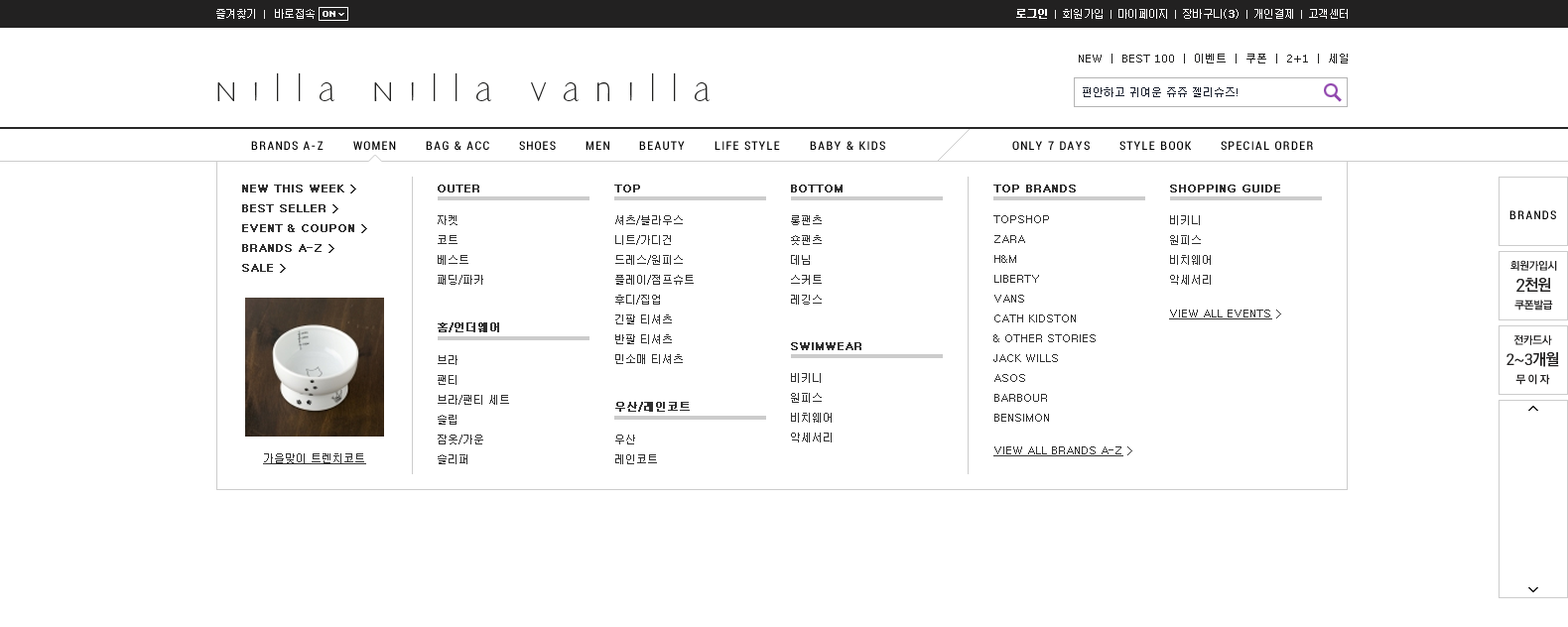
<style>
.page{position:relative;width:1568px;height:627px;background:#ffffff}
.page>*{position:absolute;margin:0}
.t1{font:10.9px "Dotum";letter-spacing:-0.05em;color:#ffffff}
.t2{font:10.9px "Dotum";letter-spacing:-0.05em;color:#ffffff;font-weight:bold}
.t3{font:10.9px "Dotum";color:#ffffff}
.t4{font:10.9px "Dotum";color:#ffffff;font-weight:bold}
.t5{font:10.9px "Dotum";color:#212120}
.t6{font:10.9px "Verdana";color:#212120}
.t7{font:38.7px "EricSansPro-Regular";letter-spacing:0.35em;color:#212120}
.t8{font:10.9px "Dotum";color:#191f2d}
.t9{font:11.9px "Roboto-Condensed";letter-spacing:0.1em;color:#000000}
.t10{font:10.9px/19.8px "Dotum";color:#303030;font-weight:bold}
.t11{font:10.9px "Dotum";color:#303030;font-weight:bold}
.t12{font:10.9px/19.8px "Dotum";color:#303030}
.t13{font:10.9px "RixGoB";letter-spacing:-0.05em;color:#222121}
.t14{font:17.9px "Roboto-Regular";letter-spacing:-0.05em;color:#222121}
.t15{font:15.9px "RixGoB";letter-spacing:-0.05em;color:#222121}
.t16{font:10.9px "Dotum";color:#303030;text-decoration:underline}
.t17{font:10.9px "Dotum";color:#303030}
.t18{font:15.9px "Roboto-Regular";letter-spacing:-0.05em;color:#222121}
</style>
<div class="page">
<p class="t1" style="left:216px;top:9px;width:39px;height:10px">즐겨찾기</p>
<p class="t1" style="left:275px;top:9px;width:40px;height:10px">바로접속</p>
<p class="t2" style="left:1016px;top:9px;width:31px;height:10px">로그인</p>
<p class="t1" style="left:1063px;top:9px;width:40px;height:10px">회원가입</p>
<p class="t1" style="left:1118px;top:9px;width:49px;height:10px">마이페이지</p>
<p class="t1" style="left:1183px;top:9px;width:39px;height:10px">장바구니</p>
<p class="t3" style="left:1224px;top:9px;width:15px;height:10px">(<span class="t4">3</span>)</p>
<p class="t1" style="left:1254px;top:9px;width:39px;height:10px">개인결제</p>
<p class="t1" style="left:1309px;top:9px;width:39px;height:10px">고객센터</p>
<p class="t5" style="left:1079px;top:54px;width:269px;height:10px">NEW  |  BEST <span class="t6">100</span>  |  이벤트  |  쿠폰  |  <span class="t6">2+1</span>  |  세일</p>
<p class="t7" style="left:217px;top:72px;width:493px;height:29px">Nilla Nilla Vanilla</p>
<p class="t8" style="left:1083px;top:87px;width:155px;height:10px">편안하고 귀여운 쥬쥬 젤리슈즈!</p>
<p class="t9" style="left:251px;top:141px;width:73px;height:9px">BRANDS A-Z</p>
<p class="t9" style="left:353px;top:141px;width:43px;height:9px">WOMEN</p>
<p class="t9" style="left:426px;top:141px;width:63px;height:9px">BAG &amp; ACC</p>
<p class="t9" style="left:519px;top:141px;width:37px;height:9px">SHOES</p>
<p class="t9" style="left:586px;top:141px;width:23px;height:9px">MEN</p>
<p class="t9" style="left:639px;top:141px;width:46px;height:9px">BEAUTY</p>
<p class="t9" style="left:715px;top:141px;width:65px;height:9px">LIFE STYLE</p>
<p class="t9" style="left:810px;top:141px;width:75px;height:9px">BABY &amp; KIDS</p>
<p class="t9" style="left:1012px;top:141px;width:78px;height:9px">ONLY 7 DAYS</p>
<p class="t9" style="left:1119px;top:141px;width:73px;height:9px">STYLE BOOK</p>
<p class="t9" style="left:1221px;top:141px;width:92px;height:9px">SPECIAL ORDER</p>
<p class="t10" style="left:242px;top:185px;width:125px;height:88px">NEW THIS WEEK &gt;<br>BEST SELLER &gt;<br>EVENT &amp; COUPON &gt;<br>BRANDS A-Z &gt;<br>SALE &gt;</p>
<p class="t11" style="left:438px;top:185px;width:41px;height:8px">OUTER</p>
<p class="t11" style="left:614px;top:185px;width:26px;height:8px">TOP</p>
<p class="t11" style="left:791px;top:185px;width:52px;height:8px">BOTTOM</p>
<p class="t11" style="left:993px;top:185px;width:83px;height:8px">TOP BRANDS</p>
<p class="t11" style="left:1170px;top:185px;width:110px;height:8px">SHOPPING GUIDE</p>
<p class="t12" style="left:438px;top:215px;width:45px;height:70px">자켓<br>코트<br>베스트<br>패딩/파카</p>
<p class="t12" style="left:615px;top:215px;width:79px;height:149px">셔츠/블라우스<br>니트/가디건<br>드레스/원피스<br>플레이/점프슈트<br>후디/집업<br>긴팔 티셔츠<br>반팔 티셔츠<br>민소매 티셔츠</p>
<p class="t12" style="left:791px;top:215px;width:31px;height:90px">롱팬츠<br>숏팬츠<br>데님<br>스커트<br>레깅스</p>
<p class="t12" style="left:993px;top:215px;width:103px;height:207px">TOPSHOP<br>ZARA<br>H&amp;M<br>LIBERTY<br>VANS<br>CATH KIDSTON<br>&amp; OTHER STORIES<br>JACK WILLS<br>ASOS<br>BARBOUR<br>BENSIMON</p>
<p class="t12" style="left:1170px;top:215px;width:41px;height:70px">비키니<br>원피스<br>비치웨어<br>악세서리</p>
<p class="t9" style="left:1509px;top:210px;width:47px;height:9px">BRANDS</p>
<p class="t13" style="left:1510px;top:260px;width:47px;height:51px;text-align:center">회원가입시<br><br><br>쿠폰발급</p>
<p class="t14" style="left:1516px;top:279px;width:9px;height:13px">2</p>
<p class="t15" style="left:1524px;top:278px;width:27px;height:15px">천원</p>
<p class="t16" style="left:1169px;top:310px;width:112px;height:10px">VIEW ALL EVENTS<span class="t17"> &gt;</span></p>
<p class="t11" style="left:438px;top:323px;width:61px;height:9px">홈/언더웨어</p>
<p class="t13" style="left:1513px;top:335px;width:39px;height:50px;text-align:center">전카드사<br><br><br>무 이 자</p>
<p class="t11" style="left:791px;top:342px;width:70px;height:8px">SWIMWEAR</p>
<p class="t18" style="left:1506px;top:353px;width:26px;height:12px">2~3</p>
<p class="t15" style="left:1532px;top:352px;width:27px;height:15px">개월</p>
<p class="t12" style="left:438px;top:355px;width:71px;height:109px">브라<br>팬티<br>브라/팬티 세트<br>슬립<br>잠옷/가운<br>슬리퍼</p>
<p class="t12" style="left:791px;top:373px;width:41px;height:70px">비키니<br>원피스<br>비치웨어<br>악세서리</p>
<p class="t11" style="left:615px;top:402px;width:75px;height:10px">우산/레인코트</p>
<p class="t12" style="left:615px;top:435px;width:42px;height:29px">우산<br>레인코트</p>
<p class="t16" style="left:993px;top:447px;width:139px;height:10px">VIEW ALL BRANDS A-Z<span class="t17"> &gt;</span></p>
<p class="t16" style="left:263px;top:454px;width:103px;height:10px">가을맞이 트렌치코트</p>
</div>
